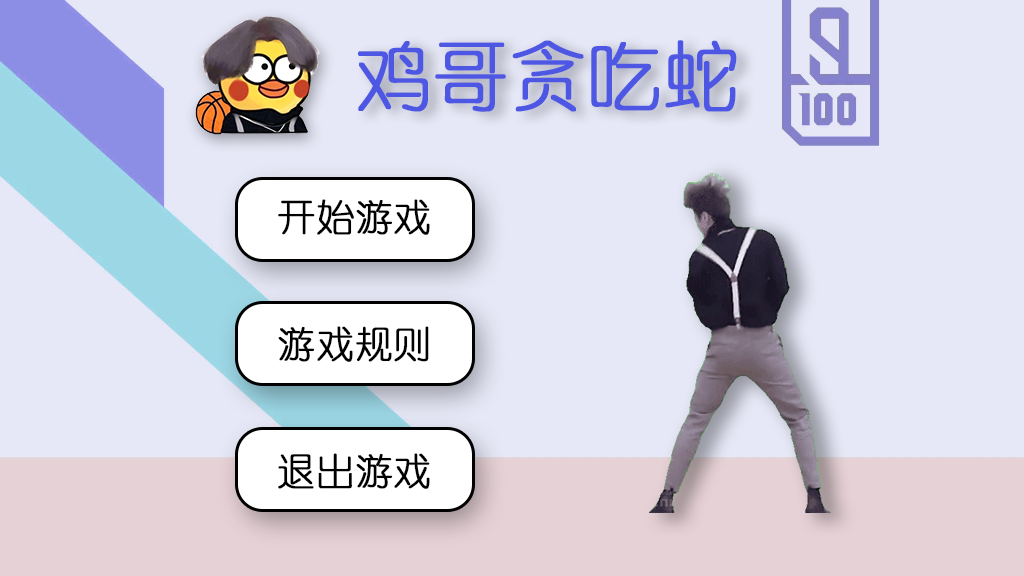
<style>
.page{position:relative;width:1024px;height:576px;background:#e6e8f7}
.page>*{position:absolute;margin:0}
.t1{font:75px "YouYuan";color:#4d57e3;font-weight:bold}
.t2{font:37.5px "YouYuan";color:#000000;font-weight:bold}
</style>
<div class="page">
<p class="t1" style="left:358px;top:40px;width:379px;height:72px">鸡哥贪吃蛇</p>
<p class="t2" style="left:278px;top:199px;width:152px;height:36px">开始游戏</p>
<p class="t2" style="left:278px;top:326px;width:151px;height:36px">游戏规则</p>
<p class="t2" style="left:278px;top:453px;width:152px;height:36px">退出游戏</p>
</div>
